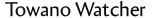
<style>
.page{position:relative;width:152px;height:18px;background:#ffffff}
.page>*{position:absolute;margin:0}
.t1{font:20px "Amira-Roman";color:#000000}
</style>
<div class="page">
<p class="t1" style="left:5px;top:1px;width:141px;height:16px;opacity:0.96">Towano Watcher</p>
</div>
